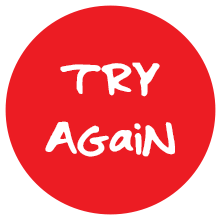
<style>
.page{position:relative;width:221px;height:221px;background:#ec1c23}
.page>*{position:absolute;margin:0}
.t1{font:49.1px "emilyyyyyy";color:#ffffff}
</style>
<div class="page">
<p class="t1" style="left:45px;top:62px;width:130px;height:95px;text-align:center">TRY<br>AGaIN</p>
</div>
